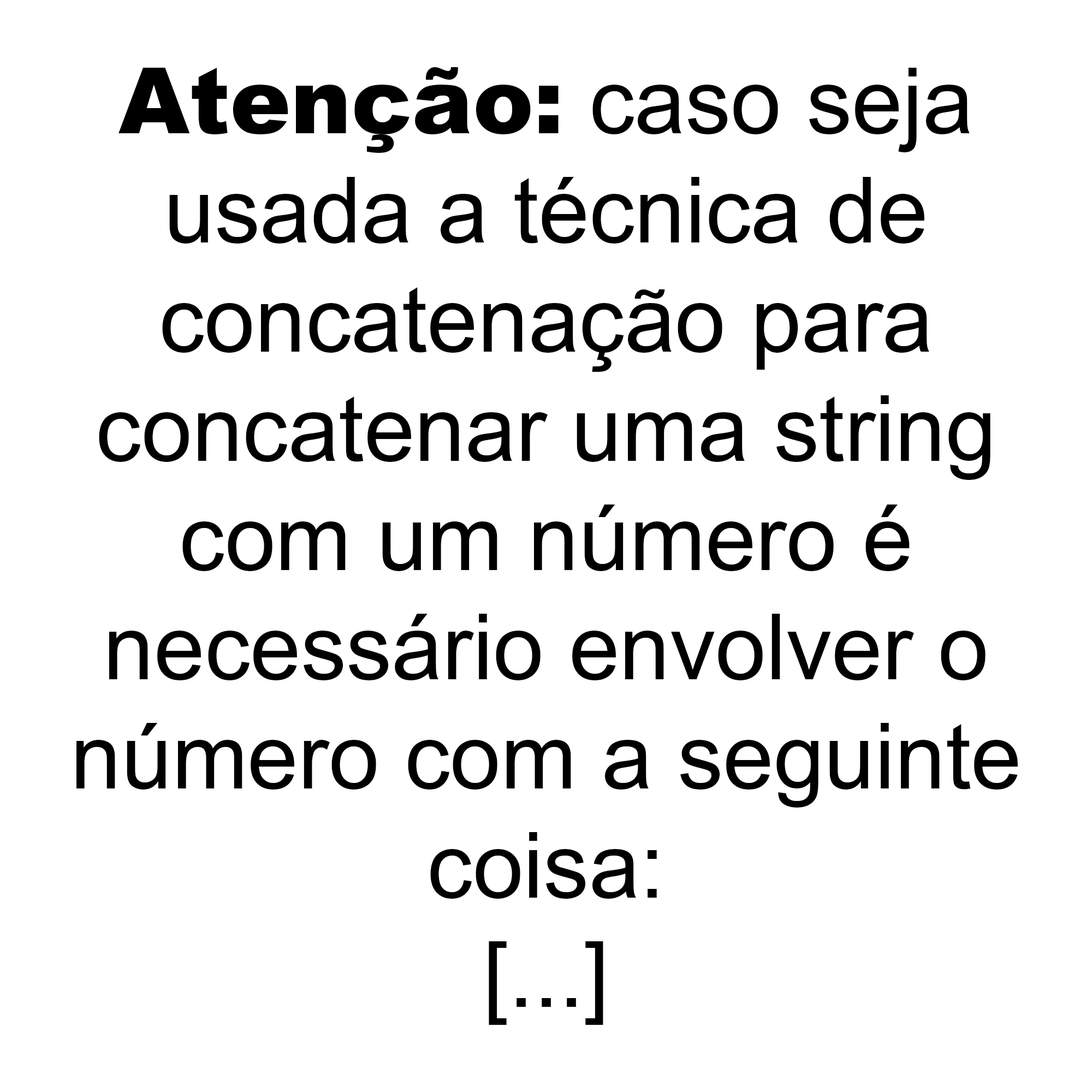
<style>
.page{position:relative;width:1092px;height:1092px;background:#ffffff}
.page>*{position:absolute;margin:0}
.t1{font:91px "ArialMT";color:#000000}
.t2{font:91px "Arial-Black";color:#000000}
</style>
<div class="page">
<p class="t1" style="left:76px;top:67px;width:942px;height:958px;text-align:center"><span class="t2">Atenção:</span> caso seja<br>usada a técnica de<br>concatenação para<br>concatenar uma string<br>com um número é<br>necessário envolver o<br>número com a seguinte<br>coisa:<br>[...]</p>
</div>
